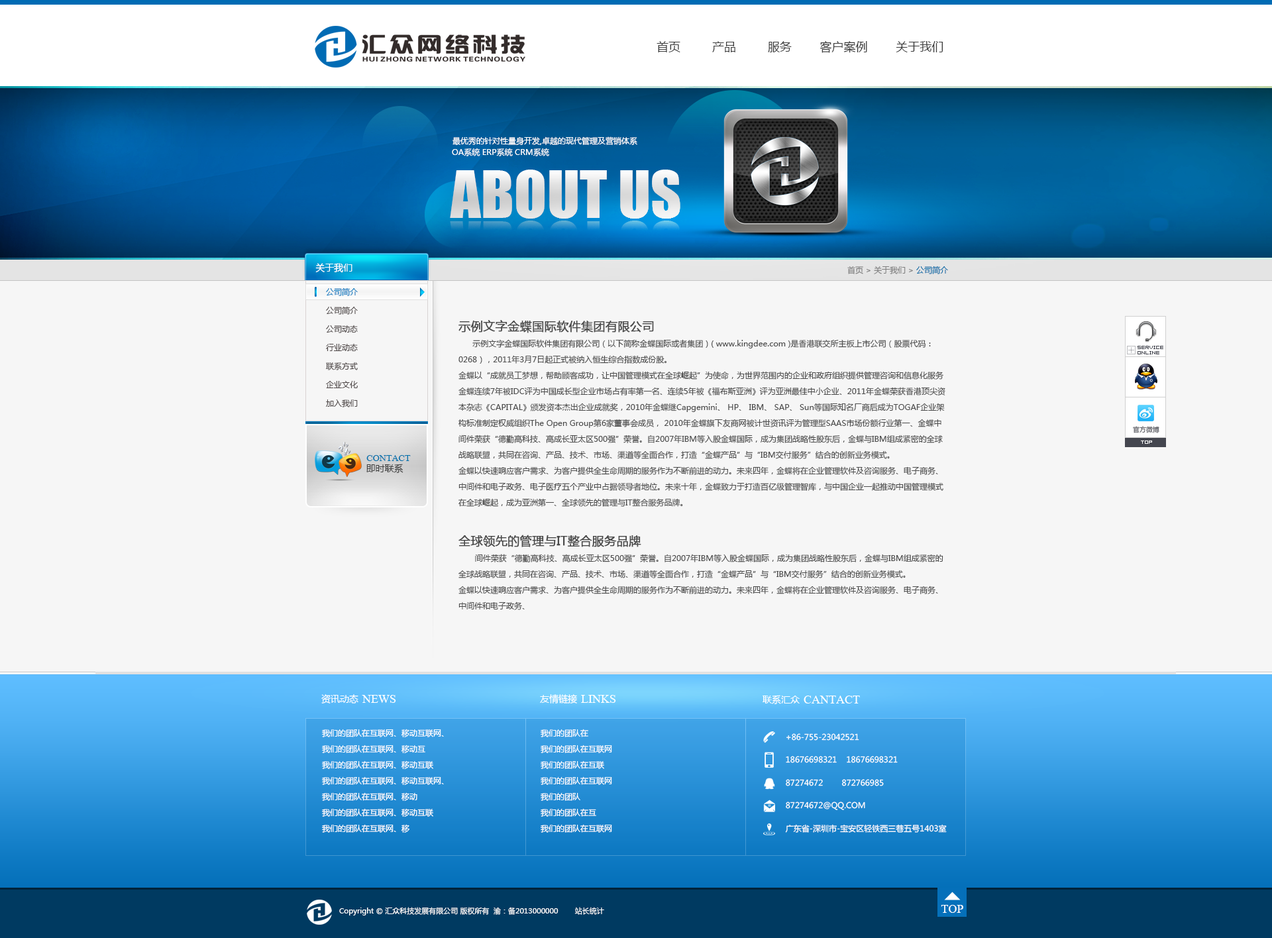
<style>
.page{position:relative;width:1272px;height:938px;background:#f6f6f6}
.page>*{position:absolute;margin:0}
.t1{font:11.9px "MicrosoftYaHei";color:#3d3d3d}
.t2{font:9.3px "MicrosoftYaHei";color:#ffffff}
.t3{font:7.9px "MicrosoftYaHei";color:#7f7f7f}
.t4{font:7.9px "MicrosoftYaHei";color:#006ba7}
.t5{font:7.9px/18.5px "MicrosoftYaHei";color:#4f4848}
.t6{font:7.9px/18.5px "MicrosoftYaHei";color:#017bc1}
.t7{font:7.9px/15.9px "MicrosoftYaHei";color:#4c4c4c}
.t8{font:11.9px/19.9px "MicrosoftYaHei";color:#4c4c4c;font-weight:bold}
.t9{font:11.9px/19.9px "MicrosoftYaHei";color:#4a4a4a;font-weight:bold}
.t10{font:5.3px/5.3px "04b08";color:#44464f}
.t11{font:6.6px "MicrosoftYaHei";color:#44464f}
.t12{font:9.3px "MongolianBaiti";color:#0172ac}
.t13{font:9.3px "MicrosoftYaHei";color:#3f3f3f}
.t14{font:11.9px "MongolianBaiti";color:#ffffff}
.t15{font:7.9px/15.9px "MicrosoftYaHei";color:#ffffff}
.t16{font:8px/22.9px "MicrosoftYaHei";color:#ffffff;text-transform:uppercase}
.t17{font:7.3px "MicrosoftYaHei";color:#ffffff}
</style>
<div class="page">
<p class="t1" style="left:656px;top:40px;width:287px;height:13px">首页         产品         服务        客户案例        关于我们</p>
<p class="t2" style="left:315px;top:263px;width:37px;height:10px">关于我们</p>
<p class="t3" style="left:847px;top:266px;width:101px;height:8px">首页 &gt; 关于我们 &gt; <span class="t4">公司简介</span></p>
<p class="t5" style="left:325px;top:287px;width:33px;height:120px"><span class="t6">公司简介<br></span>公司简介<br>公司动态<br>行业动态<br>联系方式<br>企业文化<br>加入我们</p>
<p class="t7" style="left:458px;top:320px;width:487px;height:290px"><span class="t8">示例文字金蝶国际软件集团有限公司 <br></span>      示例文字金蝶国际软件集团有限公司（以下简称金蝶国际或者集团）( www.kingdee.com )是香港联交所主板上市公司（股票代码：0268），2011年3月7日起正式被纳入恒生综合指数成份股。<br>金蝶以“成就员工梦想，帮助顾客成功，让中国管理模式在全球崛起”为使命，为世界范围内的企业和政府组织提供管理咨询和信息化服务金蝶连续7年被IDC评为中国成长型企业市场占有率第一名、连续5年被《福布斯亚洲》评为亚洲最佳中小企业、2011年金蝶荣获香港顶尖资本杂志《CAPITAL》颁发资本杰出企业成就奖，2010年金蝶继Capgemini、 HP、 IBM、 SAP、 Sun等国际知名厂商后成为TOGAF企业架构标准制定权威组织The Open Group第6家董事会成员， 2010年金蝶旗下友商网被计世资讯评为管理型SAAS市场份额行业第一、金蝶中间件荣获“德勤高科技、高成长亚太区500强”荣誉。自2007年IBM等入股金蝶国际，成为集团战略性股东后，金蝶与IBM组成紧密的全球战略联盟，共同在咨询、产品、技术、市场、渠道等全面合作，打造“金蝶产品”与“IBM交付服务”结合的创新业务模式。<br>金蝶以快速响应客户需求、为客户提供全生命周期的服务作为不断前进的动力。未来四年，金蝶将在企业管理软件及咨询服务、电子商务、中间件和电子政务、电子医疗五个产业中占据领导者地位。未来十年，金蝶致力于打造百亿级管理智库，与中国企业一起推动中国管理模式在全球崛起，成为亚洲第一、全球领先的管理与IT整合服务品牌。<br><br><span class="t9">全球领先的管理与IT整合服务品牌<br></span>       间件荣获“德勤高科技、高成长亚太区500强”荣誉。自2007年IBM等入股金蝶国际，成为集团战略性股东后，金蝶与IBM组成紧密的全球战略联盟，共同在咨询、产品、技术、市场、渠道等全面合作，打造“金蝶产品”与“IBM交付服务”结合的创新业务模式。<br>金蝶以快速响应客户需求、为客户提供全生命周期的服务作为不断前进的动力。未来四年，金蝶将在企业管理软件及咨询服务、电子商务、中间件和电子政务、</p>
<p class="t10" style="left:1137px;top:346px;width:26px;height:8px">SERVICE <br>ONLINE</p>
<p class="t11" style="left:1132px;top:426px;width:27px;height:7px">官方微博</p>
<p class="t12" style="left:366px;top:455px;width:45px;height:6px">CONTACT</p>
<p class="t13" style="left:366px;top:464px;width:37px;height:9px">即时联系</p>
<p class="t2" style="left:321px;top:694px;width:37px;height:9px">资讯动态</p>
<p class="t14" style="left:362px;top:695px;width:34px;height:8px">NEWS</p>
<p class="t2" style="left:540px;top:694px;width:37px;height:9px">友情链接</p>
<p class="t14" style="left:581px;top:695px;width:35px;height:8px">LINKS</p>
<p class="t2" style="left:762px;top:695px;width:37px;height:9px">联系汇众</p>
<p class="t14" style="left:803px;top:695px;width:57px;height:8px">CANTACT</p>
<p class="t15" style="left:322px;top:728px;width:122px;height:104px">我们的团队在互联网、移动互联网、<br>我们的团队在互联网、移动互<br>我们的团队在互联网、移动互联<br>我们的团队在互联网、移动互联网、<br>我们的团队在互联网、移动<br>我们的团队在互联网、移动互联<br>我们的团队在互联网、移</p>
<p class="t15" style="left:540px;top:728px;width:72px;height:104px">我们的团队在<br>我们的团队在互联网<br>我们的团队在互联<br>我们的团队在互联网<br>我们的团队<br>我们的团队在互<br>我们的团队在互联网</p>
<p class="t16" style="left:785px;top:733px;width:161px;height:99px">+86-755-23042521<br>18676698321    18676698321<br>87274672        872766985<br>87274672@qq.com<br>广东省-深圳市-宝安区轻铁西三巷五号1403室</p>
<p class="t14" style="left:940px;top:905px;width:23px;height:8px">TOP</p>
<p class="t17" style="left:339px;top:907px;width:265px;height:8px">Copyright © 汇众科技发展有限公司 版权所有  渝：备2013000000　　 站长统计</p>
</div>
